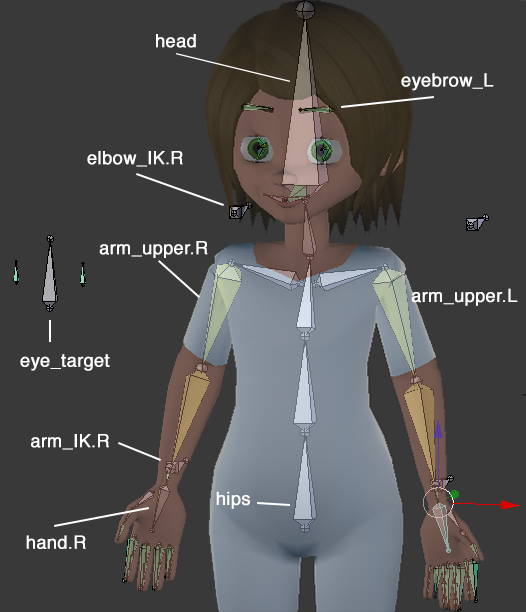
<style>
.page{position:relative;width:526px;height:612px;background:#393939}
.page>*{position:absolute;margin:0}
.t1{font:18px "Helvetica";color:#ffffff;font-weight:bold}
</style>
<div class="page">
<p class="t1" style="left:156px;top:34px;width:40px;height:14px">head</p>
<p class="t1" style="left:401px;top:73px;width:93px;height:18px">eyebrow_L</p>
<p class="t1" style="left:87px;top:151px;width:96px;height:16px">elbow_IK.R</p>
<p class="t1" style="left:99px;top:241px;width:109px;height:17px">arm_upper.R</p>
<p class="t1" style="left:411px;top:288px;width:107px;height:18px">arm_upper.L</p>
<p class="t1" style="left:20px;top:354px;width:90px;height:17px">eye_target</p>
<p class="t1" style="left:31px;top:434px;width:78px;height:16px">arm_IK.R</p>
<p class="t1" style="left:216px;top:491px;width:34px;height:18px">hips</p>
<p class="t1" style="left:26px;top:535px;width:60px;height:14px">hand.R</p>
</div>
